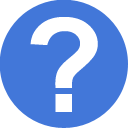
<style>
.page{position:relative;width:128px;height:128px;background:#4277d9}
.page>*{position:absolute;margin:0}
.t1{font:130px "Arial-BoldMT";color:#ffffff}
</style>
<div class="page">
<p class="t1" style="left:30px;top:17px;width:68px;height:95px">?</p>
</div>
